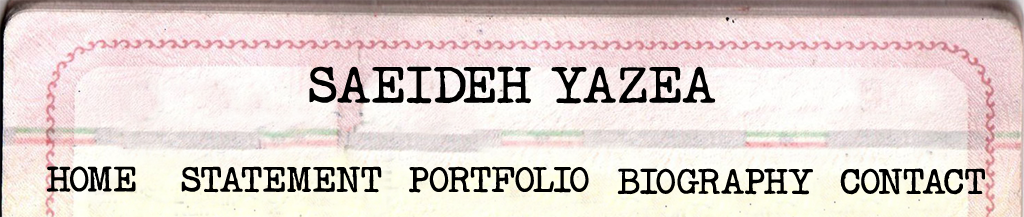
<style>
.page{position:relative;width:1024px;height:217px}
.page>*{position:absolute;margin:0}
.t1{font:46.7px "Passport";color:#000000}
.t2{font:32.3px "Passport";color:#000000}
</style>
<div class="page">
<p class="t1" style="left:309px;top:66px;width:407px;height:38px">SAEIDEH YAZEA</p>
<p class="t2" style="left:47px;top:166px;width:89px;height:26px">HOME</p>
<p class="t2" style="left:181px;top:166px;width:201px;height:27px">STATEMENT</p>
<p class="t2" style="left:409px;top:166px;width:180px;height:27px">PORTFOLIO</p>
<p class="t2" style="left:617px;top:168px;width:196px;height:27px">BIOGRAPHY</p>
<p class="t2" style="left:840px;top:168px;width:145px;height:27px">CONTACT</p>
</div>
